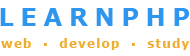
<style>
.page{position:relative;width:190px;height:56px;background:#ffffff}
.page>*{position:absolute;margin:0}
.t1{font:24px "Verdana-Bold";letter-spacing:0.28em;color:#2e96ef}
.t2{font:12px "Verdana-Bold";letter-spacing:0.1em;color:#efad2e}
</style>
<div class="page">
<p class="t1" style="left:0px;top:8px;width:190px;height:18px">LEARNPHP</p>
<p class="t2" style="left:1px;top:38px;width:188px;height:12px">web  ▪  develop  ▪  study</p>
</div>
